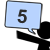
<style>
.page{position:relative;width:50px;height:50px;background:#ffffff}
.page>*{position:absolute;margin:0}
.t1{font:18.9px "Arial-BoldMT";color:#2c2c2c}
</style>
<div class="page">
<p class="t1" style="left:17px;top:9px;width:10px;height:15px;rotate:4deg">5</p>
</div>
